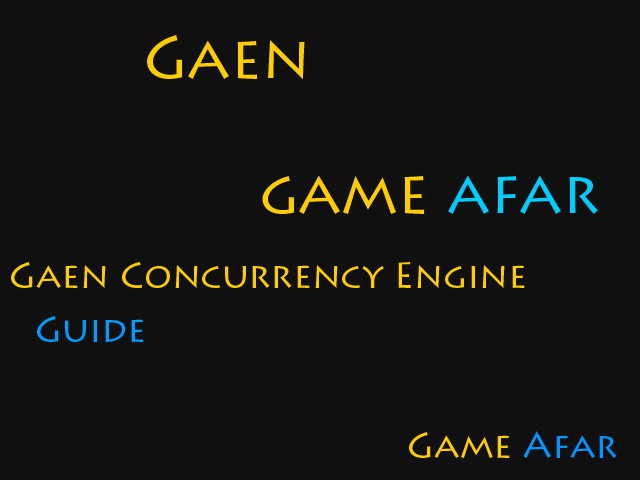
<style>
.page{position:relative;width:640px;height:480px;background:#101010}
.page>*{position:absolute;margin:0}
.t1{font:60px "LithosPro-Regular";color:#ffcc00}
.t2{font:60px "LithosPro-Regular";color:#00ccff}
.t3{font:36px "LithosPro-Regular";color:#ffcc00}
.t4{font:36px "LithosPro-Regular";color:#009cff}
.t5{font:36px "LithosPro-Regular";color:#0096ff}
</style>
<div class="page">
<p class="t1" style="left:147px;top:35px;width:158px;height:44px">Gaen</p>
<p class="t1" style="left:262px;top:175px;width:336px;height:39px">game <span class="t2">afar</span></p>
<p class="t3" style="left:11px;top:262px;width:514px;height:26px">Gaen Concurrency Engine</p>
<p class="t4" style="left:37px;top:316px;width:107px;height:26px">Guide</p>
<p class="t3" style="left:409px;top:431px;width:208px;height:27px">Game <span class="t5">Afar</span></p>
</div>
